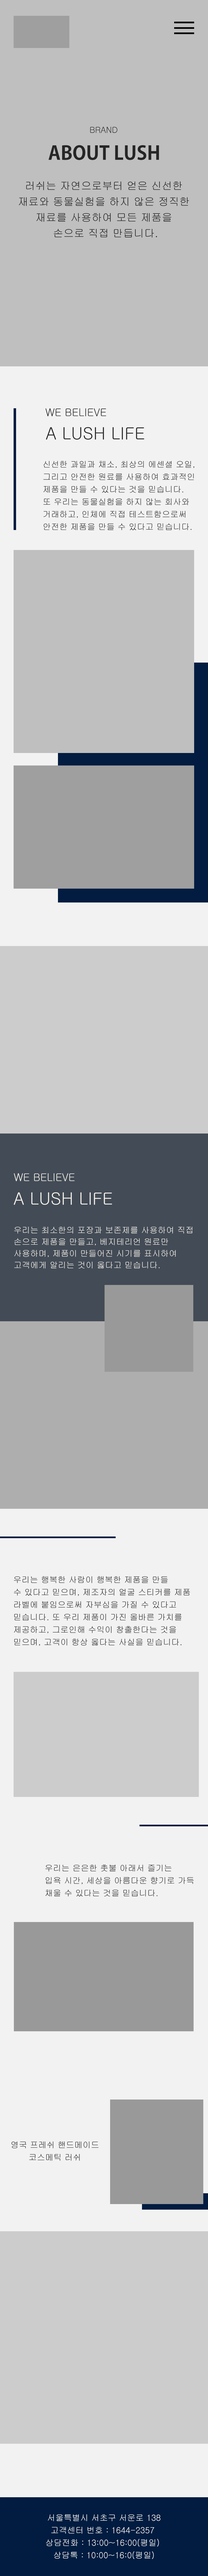
<style>
.page{position:relative;width:208px;height:2576px;background:#f2f2f2}
.page>*{position:absolute;margin:0}
.t1{font:8.3px "Gulim";color:#262626}
.t2{font:18.9px "AdobeGothicStd-Bold";color:#262626}
.t3{font:10.5px/15.8px "Gulim";color:#262626}
.t4{font:10.5px "Gulim";color:#262626}
.t5{font:16.6px "Gulim";color:#262626}
.t6{font:8.3px/12.5px "Gulim";color:#262626}
.t7{font:10.5px "Gulim";color:#f5f2eb}
.t8{font:16.6px "Gulim";color:#f5f2eb}
.t9{font:8.3px/11.6px "Gulim";color:#f5f2eb}
.t10{font:8.3px/12.5px "Gulim";color:#ffffff}
</style>
<div class="page">
<p class="t1" style="left:90px;top:127px;width:27px;height:6px">BRAND</p>
<p class="t2" style="left:49px;top:145px;width:110px;height:15px">ABOUT LUSH</p>
<p class="t3" style="left:19px;top:181px;width:170px;height:57px;text-align:center">러쉬는 자연으로부터 얻은 신선한 <br>재료와 동물실험을 하지 않은 정직한 <br>재료를 사용하여 모든 제품을 <br>손으로 직접 만듭니다.</p>
<p class="t4" style="left:45px;top:408px;width:61px;height:8px">WE BELIEVE</p>
<p class="t5" style="left:46px;top:427px;width:98px;height:13px">A LUSH LIFE</p>
<p class="t6" style="left:43px;top:461px;width:151px;height:69px">신선한 과일과 채소, 최상의 에센셜 오일,<br>그리고 안전한 원료를 사용하여 효과적인 <br>제품을 만들 수 있다는 것을 믿습니다.<br>또 우리는 동물실험을 하지 않는 회사와 <br>거래하고, 인체에 직접 테스트함으로써 <br>안전한 제품을 만들 수 있다고 믿습니다.</p>
<p class="t7" style="left:14px;top:1173px;width:61px;height:8px">WE BELIEVE</p>
<p class="t8" style="left:14px;top:1192px;width:98px;height:13px">A LUSH LIFE</p>
<p class="t9" style="left:14px;top:1227px;width:178px;height:42px">우리는 최소한의 포장과 보존제를 사용하여 직접<br>손으로 제품을 만들고, 베지테리언 원료만 <br>사용하며, 제품이 만들어진 시기를 표시하여 <br>고객에게 알리는 것이 옳다고 믿습니다.</p>
<p class="t6" style="left:14px;top:1576px;width:176px;height:70px">우리는 행복한 사람이 행복한 제품을 만들<br>수 있다고 믿으며, 제조자의 얼굴 스티커를 제품<br>라벨에 붙임으로써 자부심을 가질 수 있다고 <br>믿습니다. 또 우리 제품이 가진 올바른 가치를 <br>제공하고, 그로인해 수익이 창출한다는 것을 <br>믿으며, 고객이 항상 옳다는 사실을 믿습니다.</p>
<p class="t6" style="left:45px;top:1865px;width:149px;height:32px">우리는 은은한 촛불 아래서 즐기는 <br>입욕 시간, 세상을 아름다운 향기로 가득 <br>채울 수 있다는 것을 믿습니다.</p>
<p class="t6" style="left:11px;top:2141px;width:87px;height:20px;text-align:center">영국 프레쉬 핸드메이드<br>코스메틱 러쉬</p>
<p class="t10" style="left:46px;top:2514px;width:115px;height:45px;text-align:center">서울특별시 서초구 서운로 138<br>고객센터 번호 : 1644-2357 <br>상담전화 : 13:00~16:00(평일) <br>상담톡 : 10:00~16:0(평일)</p>
</div>
